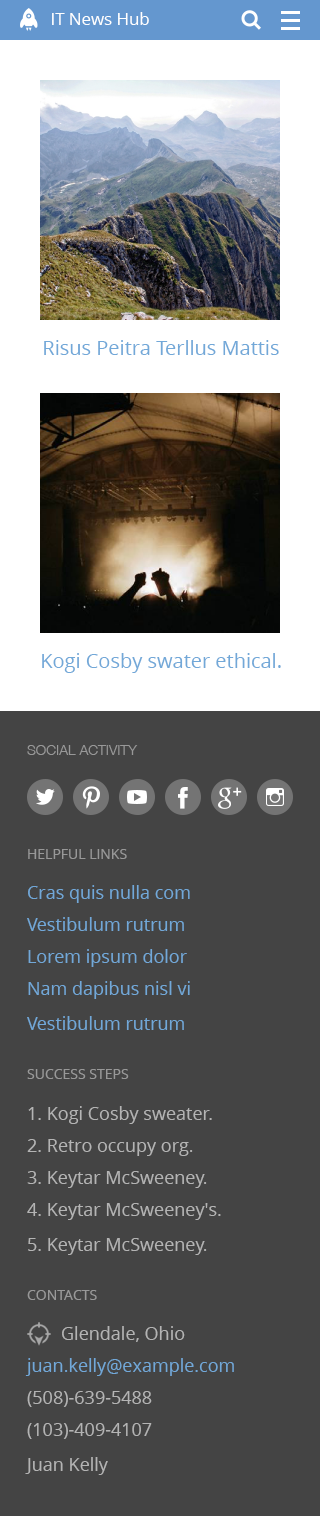
<style>
.page{position:relative;width:320px;height:1516px;background:#444444}
.page>*{position:absolute;margin:0}
.t1{font:16.8px "OpenSans";color:#ffffff}
.t2{font:20px "OpenSans";color:#72a8d8}
.t3{font:20px "OpenSans";letter-spacing:-0.111em;color:#72a8d8}
.t4{font:14px "HelveticaNeue-Light";color:#989898}
.t5{font:14px "OpenSans";color:#989898}
.t6{font:18px "OpenSans";color:#72a8d8}
.t7{font:18px "OpenSans";letter-spacing:-0.054em;color:#72a8d8}
.t8{font:18px "OpenSans";letter-spacing:-0.017em;color:#72a8d8}
.t9{font:18px "OpenSans";color:#b4b4b4}
.t10{font:18px "OpenSans";letter-spacing:-0.091em;color:#b4b4b4}
.t11{font:18px "OpenSans";letter-spacing:-0.017em;color:#b4b4b4}
.t12{font:18px "OpenSans";letter-spacing:-0.092em;color:#b4b4b4}
.t13{font:14px "OpenSans";letter-spacing:-0.067em;color:#989898}
</style>
<div class="page">
<p class="t1" style="left:52px;top:12px;width:97px;height:13px">IT News Hub</p>
<p class="t2" style="left:44px;top:340px;width:235px;height:15px">Risus Peitra <span class="t3">T</span>erllus Mattis</p>
<p class="t2" style="left:42px;top:653px;width:239px;height:20px">Kogi Cosby swater ethical.</p>
<p class="t4" style="left:27px;top:745px;width:111px;height:10px">SOCIAL ACTIVITY</p>
<p class="t5" style="left:28px;top:849px;width:99px;height:10px">HELPFUL LINKS</p>
<p class="t6" style="left:28px;top:885px;width:162px;height:18px">Cras quis nulla com</p>
<p class="t6" style="left:27px;top:917px;width:157px;height:14px"><span class="t7">V</span>estibulum rutrum</p>
<p class="t6" style="left:28px;top:949px;width:159px;height:18px">Lo<span class="t8">r</span>em ipsum dolor</p>
<p class="t6" style="left:28px;top:981px;width:162px;height:18px">Nam dapibus nisl vi</p>
<p class="t6" style="left:27px;top:1016px;width:157px;height:14px"><span class="t7">V</span>estibulum rutrum</p>
<p class="t5" style="left:27px;top:1069px;width:102px;height:10px">SUCCESS STEPS</p>
<p class="t9" style="left:28px;top:1106px;width:184px;height:18px">1. Kogi Cosby sweate<span class="t10">r</span>.</p>
<p class="t9" style="left:27px;top:1139px;width:166px;height:17px">2. Ret<span class="t11">r</span>o occupy org.</p>
<p class="t9" style="left:27px;top:1171px;width:180px;height:17px">3. Keytar McSweene<span class="t12">y</span>.</p>
<p class="t9" style="left:27px;top:1203px;width:194px;height:17px">4. Keytar McSweeney's.</p>
<p class="t9" style="left:28px;top:1238px;width:179px;height:17px">5. Keytar McSweene<span class="t12">y</span>.</p>
<p class="t5" style="left:27px;top:1290px;width:70px;height:10px">CON<span class="t13">T</span>ACTS</p>
<p class="t9" style="left:62px;top:1326px;width:123px;height:16px">Glendale, Ohio</p>
<p class="t6" style="left:25px;top:1358px;width:209px;height:18px">juan.kelly@example.com</p>
<p class="t9" style="left:27px;top:1391px;width:125px;height:16px">(508)-639-5488</p>
<p class="t9" style="left:27px;top:1423px;width:125px;height:16px">(103)-409-4107</p>
<p class="t9" style="left:25px;top:1457px;width:83px;height:18px">Juan Kelly</p>
</div>
